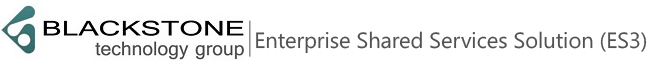
<style>
.page{position:relative;width:648px;height:65px;background:#ffffff}
.page>*{position:absolute;margin:0}
.t1{font:22px "NirmalaUI";color:#525252}
</style>
<div class="page">
<p class="t1" style="left:256px;top:31px;width:391px;height:23px">Enterprise Shared Services Solution (ES3)</p>
</div>
